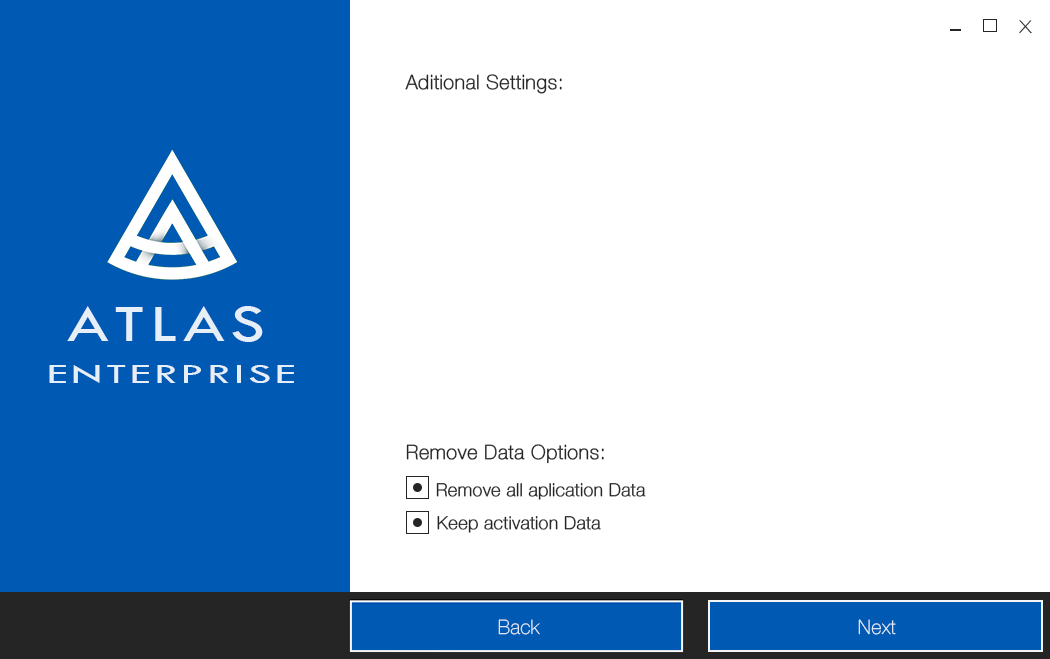
<style>
.page{position:relative;width:1050px;height:659px;background:#ffffff}
.page>*{position:absolute;margin:0}
.t1{font:24px "HelveticaNeue-Thin";color:#252526;scale:1.2 1}
.t2{font:20px "HelveticaNeue-Thin";color:#252526;font-weight:bold}
.t3{font:54px "TwCenMT-Regular";letter-spacing:0.075em;color:#e6eff8;scale:1.3 1}
.t4{font:28.8px "TwCenMT-Regular";letter-spacing:0.075em;color:#e6eff8;scale:1.62 1}
.t5{font:18px "HelveticaNeue-Thin";color:#252526;font-weight:bold}
.t6{font:20px "HelveticaNeue-Thin";color:#e6eff8}
</style>
<div class="page">
<p class="t1" style="left:1019px;top:20px;width:13px;height:14px">x</p>
<p class="t2" style="left:405px;top:74px;width:157px;height:20px">Aditional Settings:</p>
<p class="t3" style="left:67px;top:306px;width:196px;height:36px">ATLAS</p>
<p class="t4" style="left:49px;top:365px;width:245px;height:18px">ENTERPRISE</p>
<p class="t2" style="left:406px;top:444px;width:198px;height:20px">Remove Data Options:</p>
<p class="t5" style="left:436px;top:483px;width:210px;height:17px">Remove all aplication Data</p>
<p class="t5" style="left:437px;top:516px;width:164px;height:17px">Keep activation Data</p>
<p class="t6" style="left:498px;top:619px;width:42px;height:16px">Back</p>
<p class="t6" style="left:858px;top:619px;width:38px;height:16px">Next</p>
</div>
